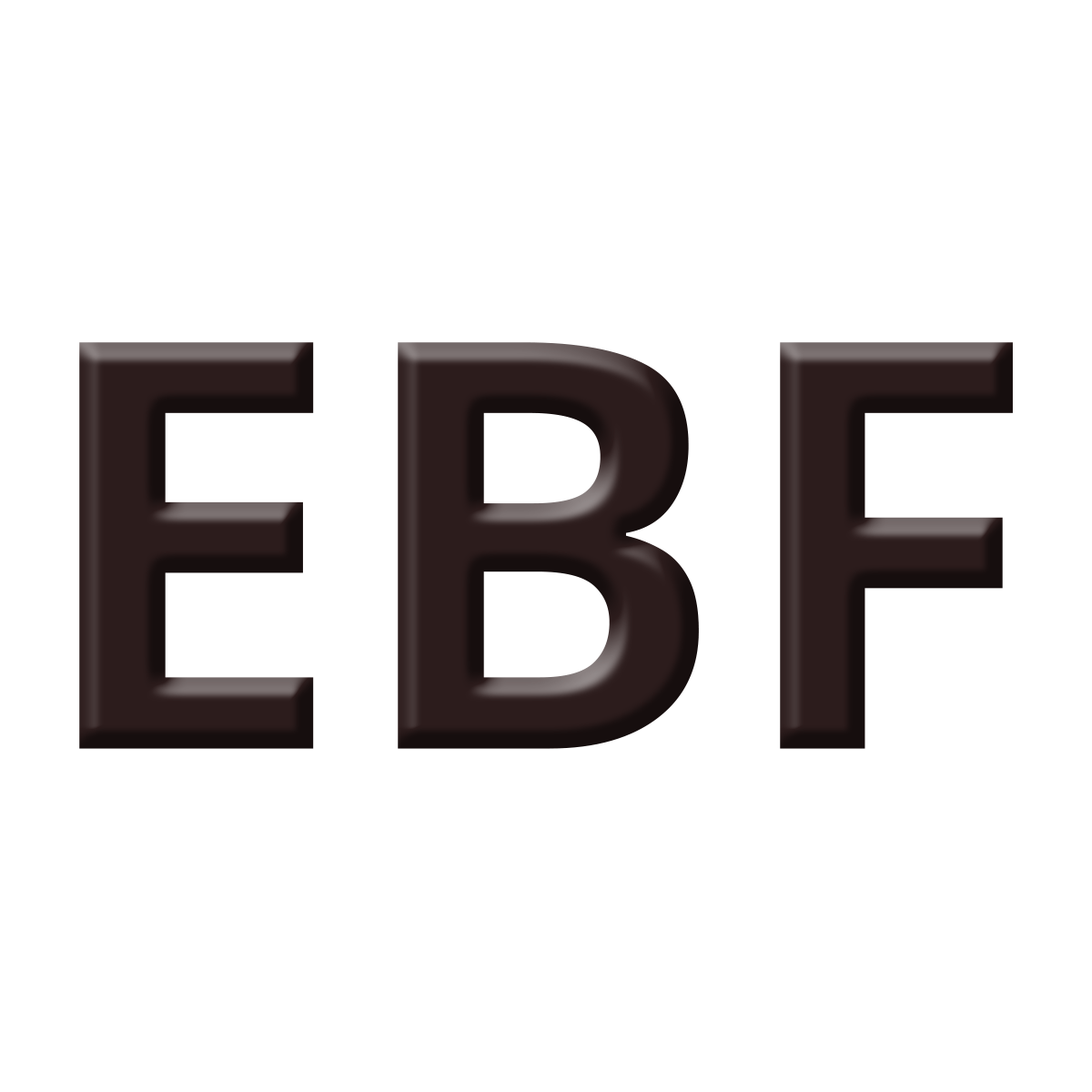
<style>
.page{position:relative;width:1092px;height:1092px;background:#ffffff}
.page>*{position:absolute;margin:0}
.t1{font:568.7px "NotoSans-Bold";color:#2c1c1c}
</style>
<div class="page">
<p class="t1" style="left:79px;top:342px;width:934px;height:407px">EBF</p>
</div>
